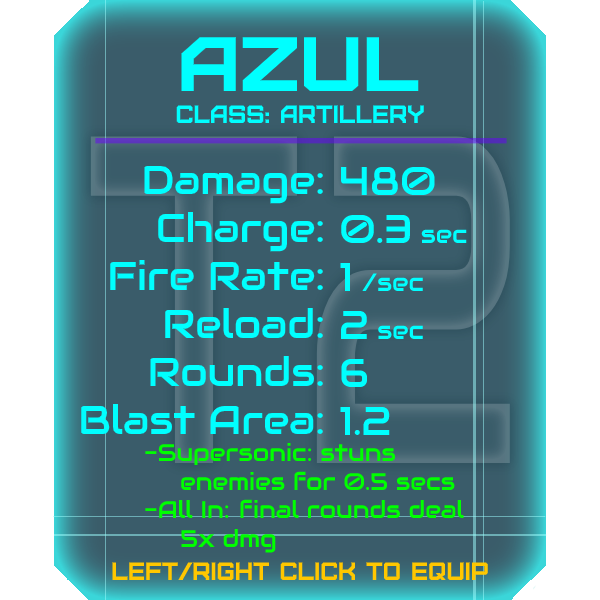
<style>
.page{position:relative;width:600px;height:600px;background:#3a5c6a}
.page>*{position:absolute;margin:0}
.t1{font:76.8px "Furore";color:#00ffff;scale:1.13 1}
.t2{font:25px "Furore";color:#00ffff}
.t3{font:40px "Audiowide-Regular";color:#00ffff}
.t4{font:25px "Audiowide-Regular";color:#00ffff}
.t5{font:24px "Audiowide-Regular";color:#00ff00}
.t6{font:25px "Furore";color:#ffc700}
</style>
<div class="page">
<p class="t1" style="left:181px;top:37px;width:238px;height:54px">Azul</p>
<p class="t2" style="left:176px;top:105px;width:248px;height:18px">Class: artillery</p>
<p class="t3" style="left:81px;top:165px;width:242px;height:269px;text-align:right">Damage:<br>Charge:<br>Fire Rate:<br>Reload:<br>Rounds:<br>Blast Area:</p>
<p class="t3" style="left:340px;top:166px;width:127px;height:269px">480<br>0.3 <span class="t4">sec<br></span>1 <span class="t4">/sec<br></span>2 <span class="t4">sec<br></span>6<br>1.2</p>
<p class="t5" style="left:145px;top:442px;width:319px;height:111px">-Supersonic: stuns<br> enemies for 0.5 secs<br>-All In:   inal rounds deal<br> 5x dmg</p>
<p class="t5" style="left:240px;top:499px;width:12px;height:19px">f</p>
<p class="t6" style="left:112px;top:562px;width:376px;height:18px">left/right click to equip</p>
</div>
